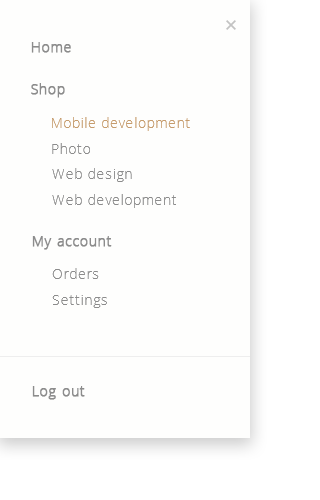
<style>
.page{position:relative;width:320px;height:500px;background:#fefefd}
.page>*{position:absolute;margin:0}
.t1{font:14px "OpenSans-Light";letter-spacing:0.05em;color:#8c8c8c;font-weight:bold}
.t2{font:14px "OpenSans-Light";letter-spacing:0.05em;color:#c69c6d}
.t3{font:14px "OpenSans-Light";letter-spacing:0.05em;color:#8c8c8c}
</style>
<div class="page">
<p class="t1" style="left:31px;top:42px;width:40px;height:11px">Home</p>
<p class="t1" style="left:31px;top:83px;width:34px;height:15px">Shop</p>
<p class="t2" style="left:52px;top:117px;width:138px;height:14px">Mobile development</p>
<p class="t3" style="left:52px;top:143px;width:38px;height:11px">Photo</p>
<p class="t3" style="left:52px;top:168px;width:80px;height:14px">Web design</p>
<p class="t3" style="left:52px;top:194px;width:124px;height:14px">Web development</p>
<p class="t1" style="left:32px;top:236px;width:80px;height:14px">My account</p>
<p class="t3" style="left:52px;top:268px;width:47px;height:11px">Orders</p>
<p class="t3" style="left:52px;top:295px;width:55px;height:13px">Settings</p>
<p class="t1" style="left:32px;top:386px;width:53px;height:14px">Log out</p>
</div>
